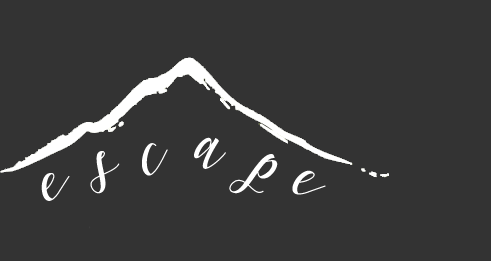
<style>
.page{position:relative;width:491px;height:261px;background:#333333}
.page>*{position:absolute;margin:0}
.t1{font:60px "Marigold";color:#ffffff}
</style>
<div class="page">
<p class="t1" style="left:41px;top:137px;width:285px;height:64px">e s c a p e</p>
</div>
